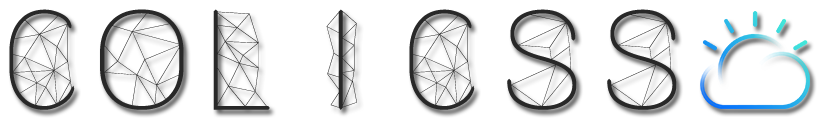
<style>
.page{position:relative;width:825px;height:120px;background:#ffffff}
.page>*{position:absolute;margin:0}
.t1{font:100px "Amethyst";color:#282828}
</style>
<div class="page">
<p class="t1" style="left:9px;top:9px;width:668px;height:101px">Colicss</p>
</div>
